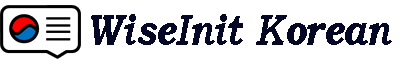
<style>
.page{position:relative;width:405px;height:64px;background:#ffffff}
.page>*{position:absolute;margin:0}
.t1{font:44.2px "BookmanOldStyle-BoldItalic";color:#040824;scale:0.82 1}
</style>
<div class="page">
<p class="t1" style="left:91px;top:14px;width:301px;height:31px">WiseInit Korean</p>
</div>
